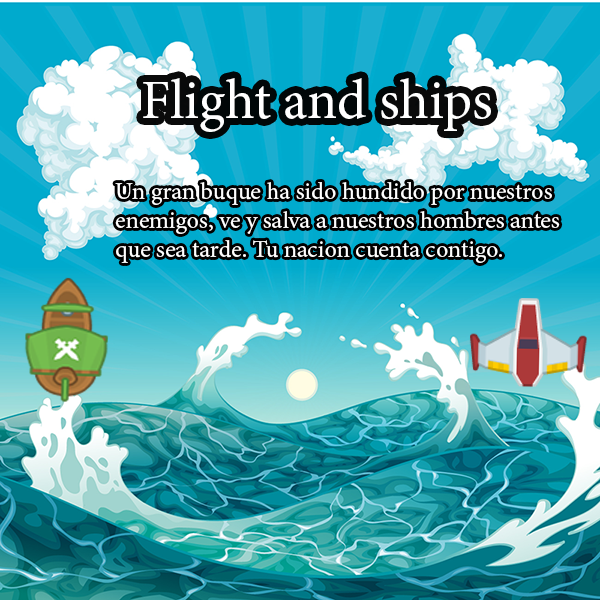
<style>
.page{position:relative;width:600px;height:600px}
.page>*{position:absolute;margin:0}
.t1{font:55.4px "MinionPro-Regular";color:#ffffff}
.t2{font:24.3px "MinionPro-Regular";color:#ffffff}
</style>
<div class="page">
<p class="t1" style="left:143px;top:78px;width:348px;height:54px">Flight and ships</p>
<p class="t2" style="left:115px;top:182px;width:445px;height:81px">Un gran buque ha sido hundido por nuestros<br>enemigos, ve y salva a nuestros hombres antes <br>que sea tarde. Tu nacion cuenta contigo.</p>
</div>
